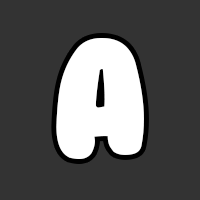
<style>
.page{position:relative;width:200px;height:200px;background:#333333}
.page>*{position:absolute;margin:0}
.t1{font:150px "BubbleGum";color:#ffffff}
</style>
<div class="page">
<p class="t1" style="left:56px;top:38px;width:88px;height:121px">A</p>
</div>
